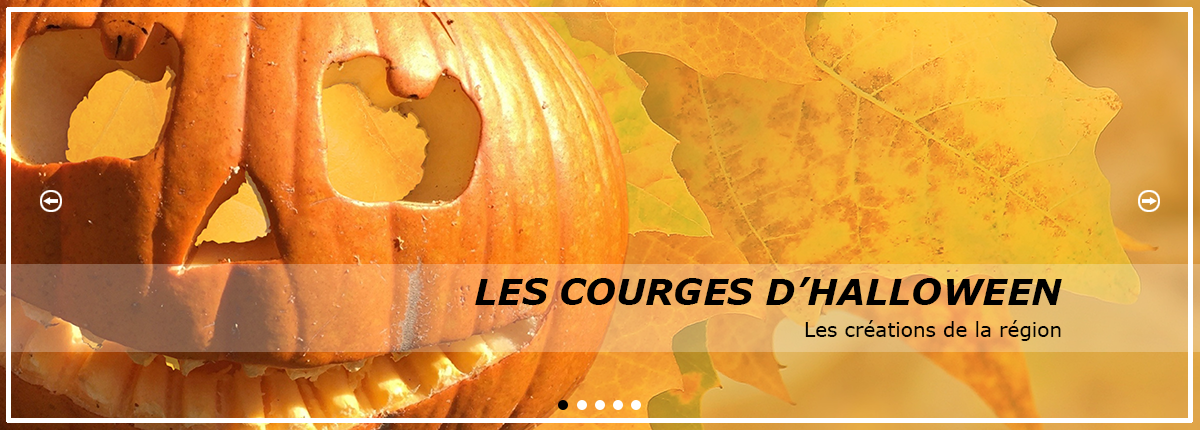
<style>
.page{position:relative;width:1200px;height:430px}
.page>*{position:absolute;margin:0}
.t1{font:36px "Verdana-BoldItalic";color:#000000;text-transform:uppercase}
.t2{font:20px "Verdana";color:#000000}
</style>
<div class="page">
<p class="t1" style="left:475px;top:277px;width:587px;height:28px">Les courges d’halloween</p>
<p class="t2" style="left:805px;top:320px;width:256px;height:21px">Les créations de la région</p>
</div>
